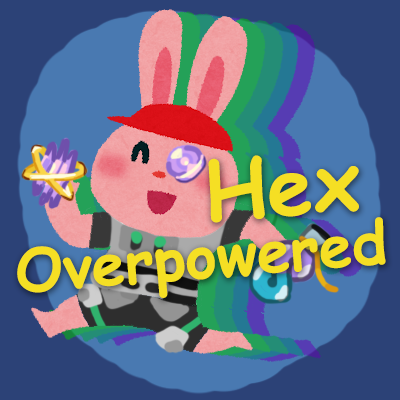
<style>
.page{position:relative;width:400px;height:400px;background:#2c4277}
.page>*{position:absolute;margin:0}
.t1{font:81.5px "ComicSansMS-Bold";color:#f5df24}
.t2{font:59.6px "ComicSansMS-Bold";color:#f5df24}
</style>
<div class="page">
<p class="t1" style="left:208px;top:155px;width:151px;height:68px;rotate:-5deg">Hex</p>
<p class="t2" style="left:17px;top:217px;width:369px;height:81px;rotate:-5deg">Overpowered</p>
</div>
